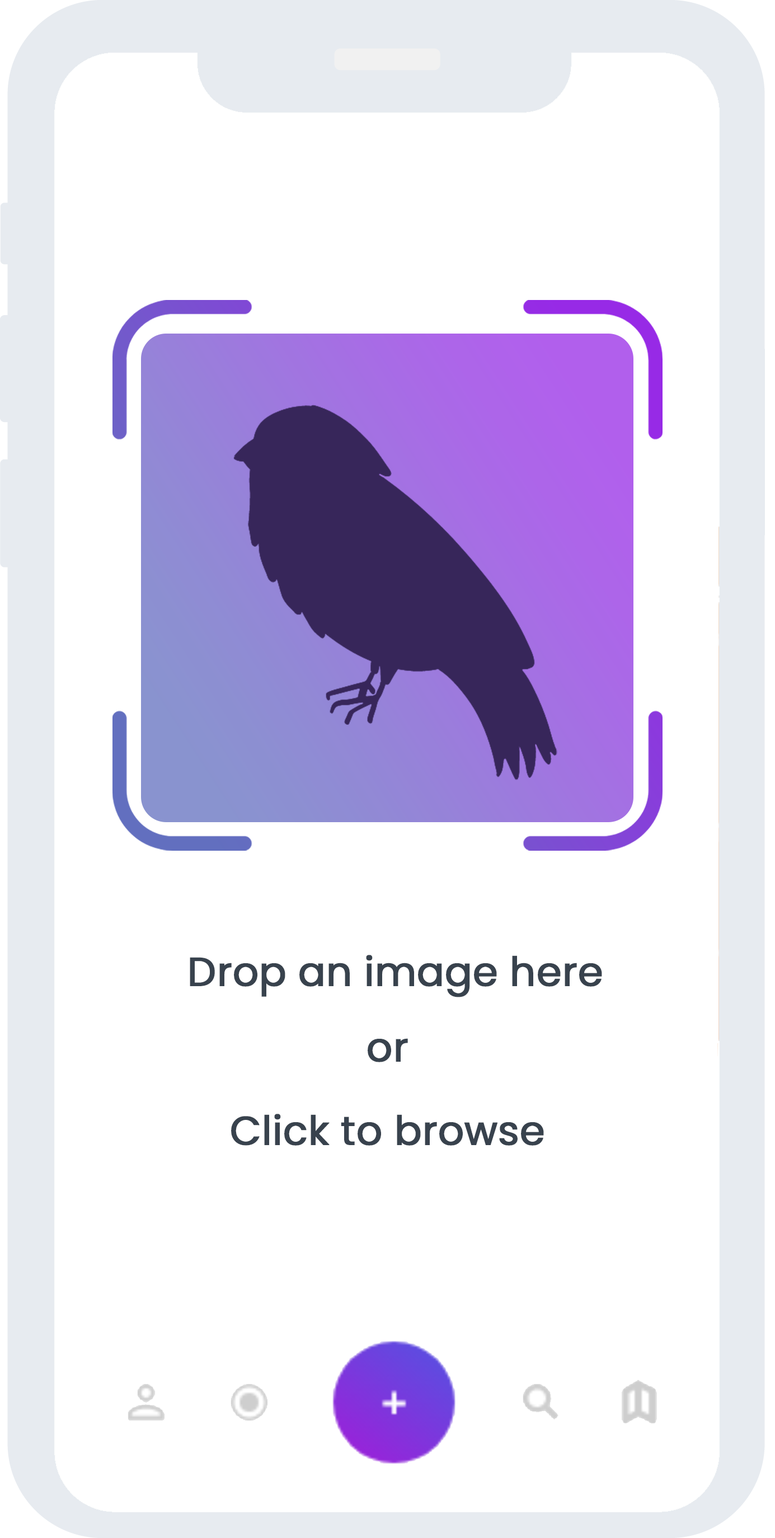
<style>
.page{position:relative;width:775px;height:1538px;background:#ffffff}
.page>*{position:absolute;margin:0}
.t1{font:40.3px "Poppins-Regular";letter-spacing:-0.01em;color:#38424d;font-weight:bold}
</style>
<div class="page">
<p class="t1" style="left:190px;top:955px;width:412px;height:42px">Drop an image here</p>
<p class="t1" style="left:368px;top:1038px;width:40px;height:24px">or</p>
<p class="t1" style="left:231px;top:1114px;width:313px;height:32px">Click to browse</p>
</div>
